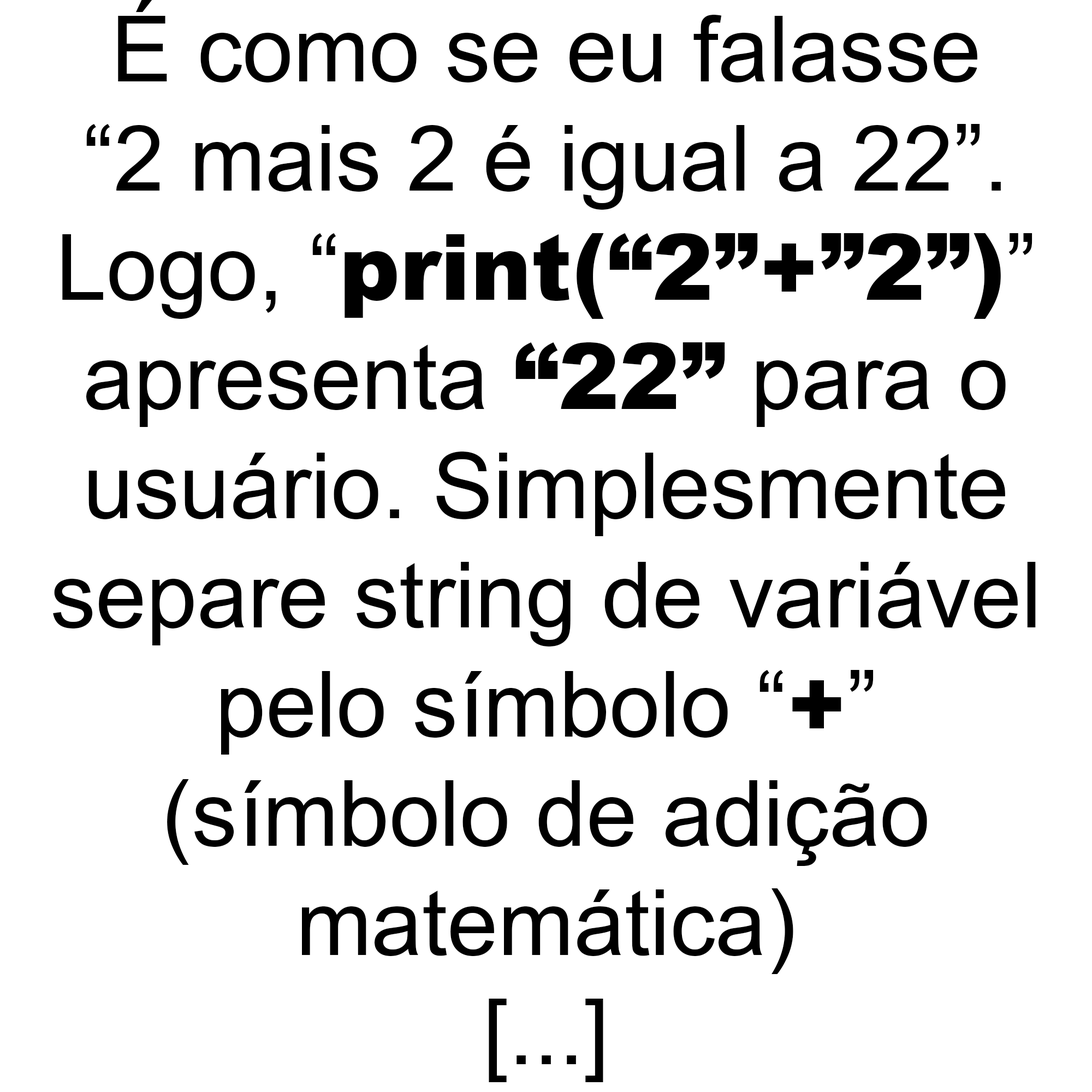
<style>
.page{position:relative;width:1092px;height:1092px;background:#ffffff}
.page>*{position:absolute;margin:0}
.t1{font:91px "ArialMT";color:#000000}
.t2{font:91px "Arial-Black";color:#000000}
</style>
<div class="page">
<p class="t1" style="left:53px;top:0px;width:983px;height:1082px;text-align:center">É como se eu falasse<br>“2 mais 2 é igual a 22”.<br>Logo, “<span class="t2">print(“2”+”2”)</span>”<br>apresenta <span class="t2">“22”</span> para o<br>usuário. Simplesmente<br>separe string de variável<br>pelo símbolo “<span class="t2">+</span>”<br>(símbolo de adição<br>matemática)<br>[...]</p>
</div>
